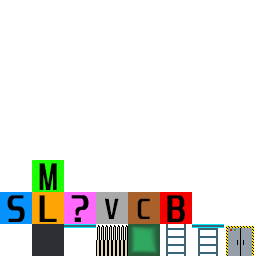
<style>
.page{position:relative;width:256px;height:256px;background:#ffffff}
.page>*{position:absolute;margin:0}
.t1{font:33.3px "Unispace-Bold";color:#000000}
.t2{font:25px "Unispace-Bold";color:#000000}
</style>
<div class="page">
<p class="t1" style="left:39px;top:163px;width:18px;height:27px">M</p>
<p class="t1" style="left:7px;top:195px;width:18px;height:27px">S</p>
<p class="t1" style="left:39px;top:195px;width:18px;height:27px">L</p>
<p class="t2" style="left:104px;top:198px;width:15px;height:21px">V</p>
<p class="t2" style="left:137px;top:198px;width:13px;height:21px">C</p>
<p class="t1" style="left:167px;top:195px;width:18px;height:27px">B</p>
</div>
